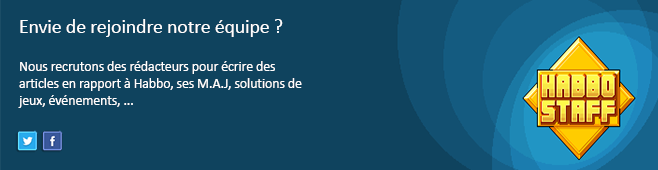
<style>
.page{position:relative;width:658px;height:170px;background:#0f435e}
.page>*{position:absolute;margin:0}
.t1{font:20px "Calibri";letter-spacing:-0.01em;color:#ffffff}
.t2{font:14px "Calibri";letter-spacing:-0.01em;color:#ffffff}
</style>
<div class="page">
<p class="t1" style="left:20px;top:19px;width:263px;height:18px">Envie de rejoindre notre équipe ?</p>
<p class="t2" style="left:18px;top:61px;width:284px;height:47px">Nous recrutons des rédacteurs pour écrire des articles en rapport à Habbo, ses M.A.J, solutions de jeux, événements, ...</p>
</div>
